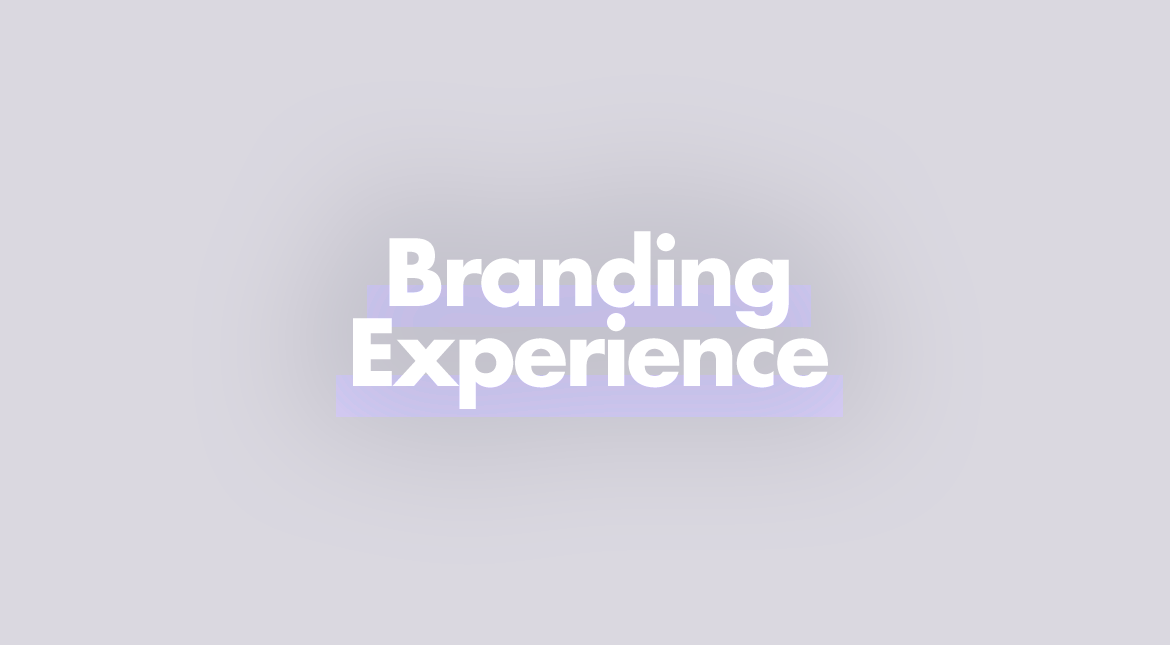
<style>
.page{position:relative;width:1170px;height:645px;background:#dad8e0}
.page>*{position:absolute;margin:0}
.t1{font:90px/80px "FuturaStd-Bold";letter-spacing:-0.034em;color:#ffffff}
</style>
<div class="page">
<p class="t1" style="left:353px;top:231px;width:475px;height:178px;text-align:center">Branding<br>Experience</p>
</div>
